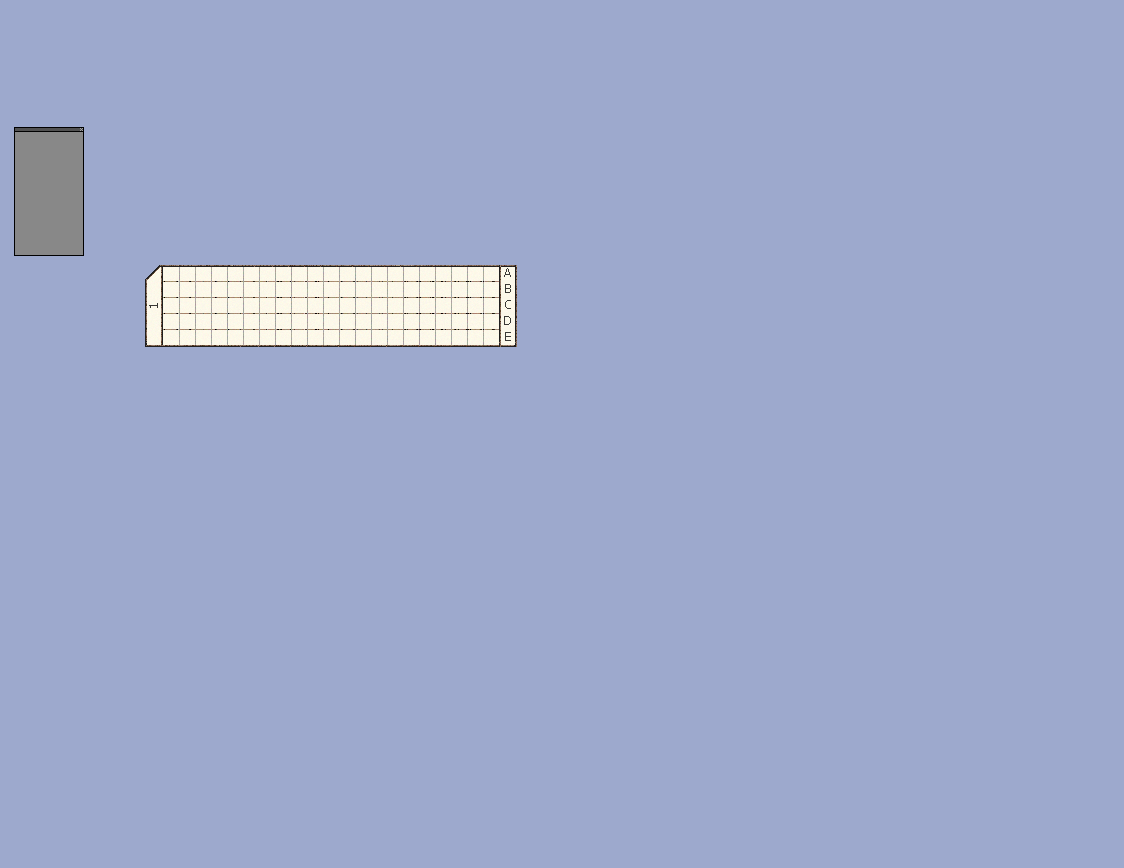
<style>
.page{position:relative;width:1124px;height:868px;background:#9da9cd}
.page>*{position:absolute;margin:0}
.t1{font:12px "Tahoma";color:#3a3935}
.t2{font:11.7px "Tahoma";color:#3a3935}
</style>
<div class="page">
<p class="t1" style="left:504px;top:268px;width:7px;height:9px">A</p>
<p class="t1" style="left:505px;top:284px;width:6px;height:9px">B</p>
<p class="t2" style="left:149px;top:303px;width:9px;height:5px;rotate:-90deg">1</p>
<p class="t1" style="left:505px;top:300px;width:6px;height:9px">C</p>
<p class="t1" style="left:504px;top:316px;width:7px;height:9px">D</p>
<p class="t1" style="left:505px;top:332px;width:6px;height:9px">E</p>
</div>
